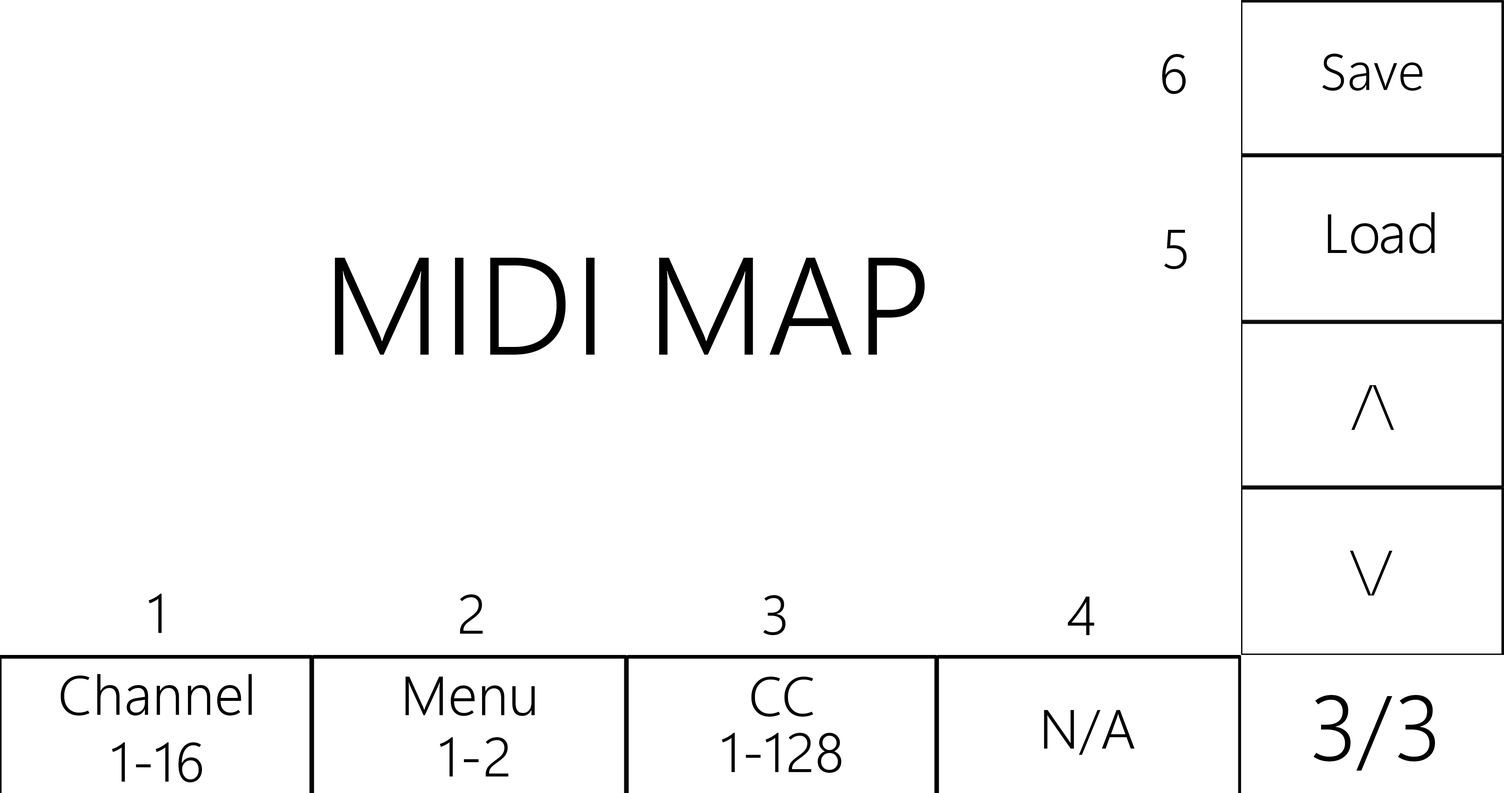
<style>
.page{position:relative;width:1504px;height:793px;background:#ffffff}
.page>*{position:absolute;margin:0}
.t1{font:55.1px "SegoeUIVariable-LightSmall";color:#000000}
.t2{font:50.8px "SegoeUIVariable-LightSmall";color:#000000}
.t3{font:138.3px "SegoeUIVariable-LightSmall";color:#000000}
.t4{font:91.8px "SegoeUIVariable-LightSmall";color:#000000}
</style>
<div class="page">
<p class="t1" style="left:1162px;top:54px;width:24px;height:40px">6</p>
<p class="t2" style="left:1322px;top:54px;width:100px;height:37px">Save</p>
<p class="t1" style="left:1328px;top:212px;width:106px;height:42px">Load</p>
<p class="t1" style="left:1164px;top:230px;width:23px;height:39px">5</p>
<p class="t3" style="left:335px;top:258px;width:590px;height:97px">MIDI MAP</p>
<p class="t1" style="left:1351px;top:385px;width:43px;height:45px">/\</p>
<p class="t1" style="left:1350px;top:551px;width:42px;height:44px">\/</p>
<p class="t1" style="left:148px;top:594px;width:14px;height:39px">1</p>
<p class="t1" style="left:460px;top:594px;width:23px;height:40px">2</p>
<p class="t1" style="left:763px;top:595px;width:23px;height:40px">3</p>
<p class="t1" style="left:1068px;top:597px;width:26px;height:38px">4</p>
<p class="t1" style="left:61px;top:674px;width:191px;height:42px">Channel</p>
<p class="t1" style="left:405px;top:677px;width:130px;height:39px">Menu</p>
<p class="t1" style="left:751px;top:677px;width:62px;height:40px">CC</p>
<p class="t4" style="left:1313px;top:695px;width:122px;height:76px">3/3</p>
<p class="t1" style="left:1044px;top:710px;width:90px;height:45px">N/A</p>
<p class="t1" style="left:439px;top:737px;width:69px;height:39px">1-2</p>
<p class="t1" style="left:721px;top:733px;width:120px;height:40px">1-128</p>
<p class="t1" style="left:112px;top:742px;width:90px;height:40px">1-16</p>
</div>
